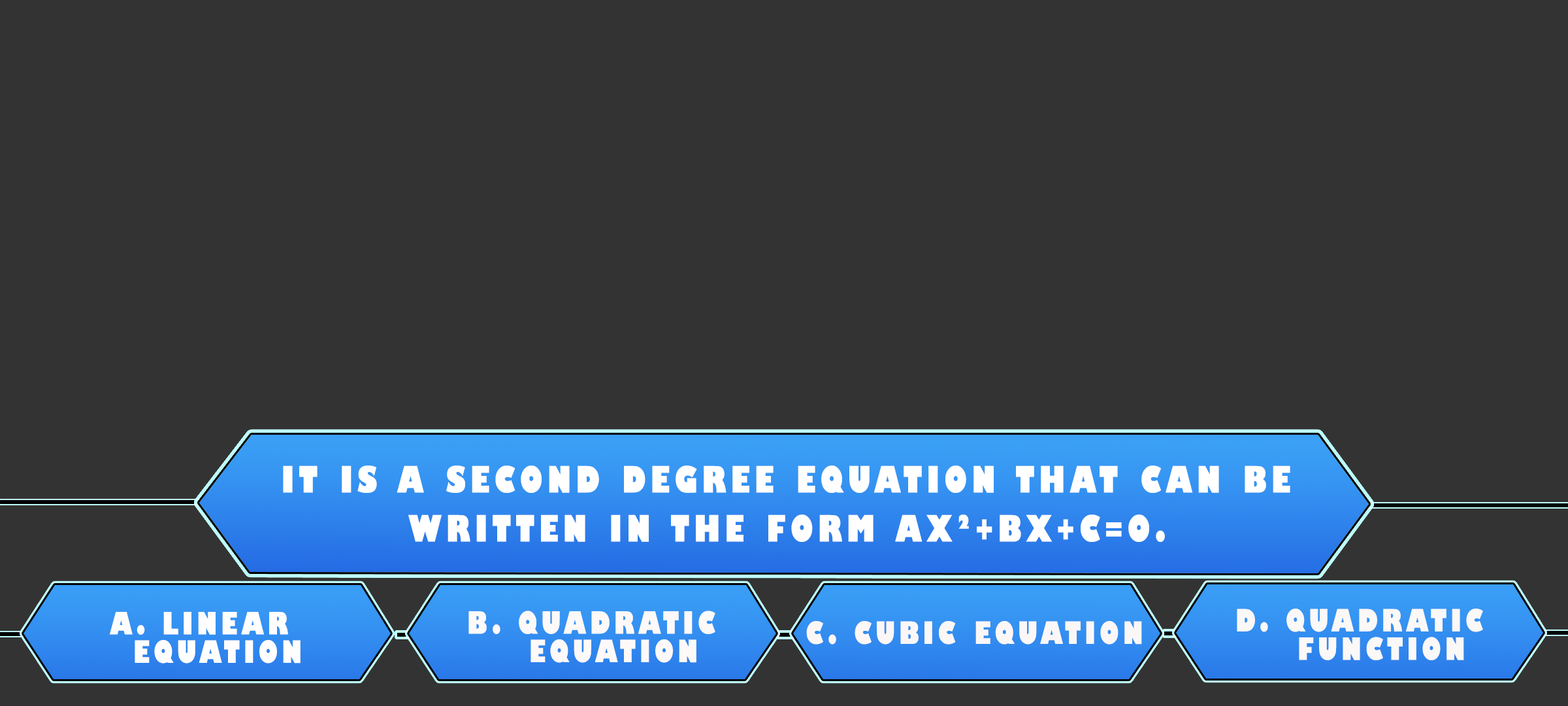
<style>
.page{position:relative;width:1568px;height:706px;background:#333333}
.page>*{position:absolute;margin:0}
.t1{font:35.4px/49px "GillSans-UltraBoldCondensed";letter-spacing:0.115em;color:#ffffff;text-transform:uppercase;scale:1.12 1}
.t2{font:29.9px/28.4px "GillSans-UltraBoldCondensed";letter-spacing:0.115em;color:#fffefe;text-transform:uppercase;scale:1.12 1}
.t3{font:29.9px/28.4px "GillSans-UltraBoldCondensed";letter-spacing:0.115em;color:#fdf9f9;text-transform:uppercase;scale:1.12 1}
.t4{font:29.9px/28.4px "GillSans-UltraBoldCondensed";letter-spacing:0.115em;color:#fbf8f8;text-transform:uppercase;scale:1.12 1}
.t5{font:29.9px "GillSans-UltraBoldCondensed";letter-spacing:0.115em;color:#fcf7f7;text-transform:uppercase;scale:1.12 1}
</style>
<div class="page">
<p class="t1" style="left:283px;top:465px;width:1007px;height:77px;text-align:center">It is a second degree equation that can be<br>written in the form ax²+bx+c=0.</p>
<p class="t2" style="left:110px;top:612px;width:191px;height:51px">a. Linear<br> Equation</p>
<p class="t3" style="left:468px;top:610px;width:247px;height:52px">b. Quadratic<br>   Equation</p>
<p class="t4" style="left:1237px;top:608px;width:246px;height:52px">d. Quadratic<br>   function</p>
<p class="t5" style="left:806px;top:621px;width:336px;height:23px">c. Cubic Equation</p>
</div>
